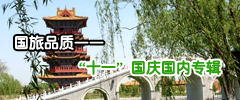
<style>
.page{position:relative;width:240px;height:100px}
.page>*{position:absolute;margin:0}
.t1{font:15px "GBYenRound-Heavy";color:#ffffff}
.t2{font:15px "GBYenRound-Heavy";color:#2c9f0d}
</style>
<div class="page">
<p class="t1" style="left:15px;top:35px;width:89px;height:15px">国旅品质——</p>
<p class="t2" style="left:79px;top:60px;width:142px;height:15px">“十一”国庆国内专辑</p>
</div>
